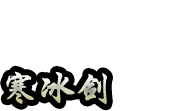
<style>
.page{position:relative;width:172px;height:111px;background:#ffffff}
.page>*{position:absolute;margin:0}
.t1{font:36px "STXingkai";letter-spacing:0.025em;font-weight:bold}
</style>
<div class="page">
<p class="t1" style="left:6px;top:71px;width:101px;height:34px">寒冰剑</p>
</div>
